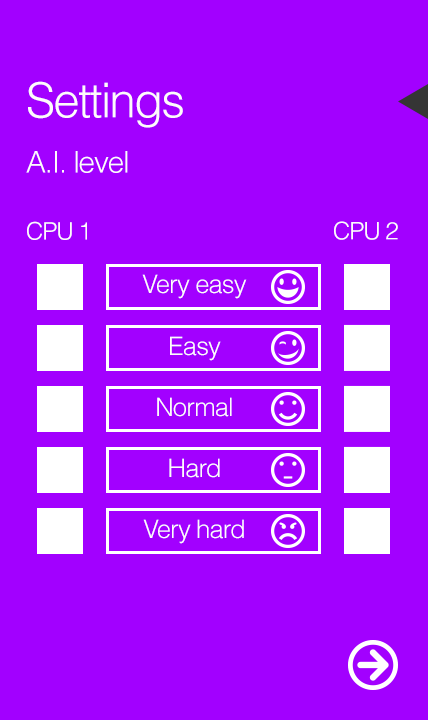
<style>
.page{position:relative;width:428px;height:720px;background:#a200ff}
.page>*{position:absolute;margin:0}
.t1{font:48px "Helvetica-Light";letter-spacing:-0.04em;color:#fffbfb}
.t2{font:29.8px "Helvetica-Light";letter-spacing:-0.04em;color:#fffbfb}
.t3{font:24px "Helvetica-Light";letter-spacing:-0.04em;color:#fffbfb}
.t4{font:25.5px "Helvetica-Light";letter-spacing:-0.04em;color:#fffbfb}
</style>
<div class="page">
<p class="t1" style="left:28px;top:81px;width:155px;height:47px">Settings</p>
<p class="t2" style="left:26px;top:151px;width:102px;height:22px">A.I. level</p>
<p class="t3" style="left:27px;top:221px;width:60px;height:19px">CPU 1</p>
<p class="t3" style="left:334px;top:221px;width:64px;height:19px">CPU 2</p>
<p class="t4" style="left:142px;top:274px;width:105px;height:25px">Very easy</p>
<p class="t4" style="left:170px;top:336px;width:51px;height:25px">Easy</p>
<p class="t4" style="left:157px;top:397px;width:75px;height:20px">Normal</p>
<p class="t4" style="left:169px;top:458px;width:51px;height:20px">Hard</p>
<p class="t4" style="left:143px;top:519px;width:101px;height:25px">Very hard</p>
</div>
